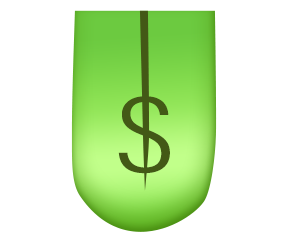
<style>
.page{position:relative;width:284px;height:242px;background:#ffffff}
.page>*{position:absolute;margin:0}
.t1{font:110px "AcuminConcept-CondensedLight";letter-spacing:0.025em;color:#435916;text-transform:uppercase;scale:1.3 1}
</style>
<div class="page">
<p class="t1" style="left:118px;top:96px;width:52px;height:78px">S</p>
</div>
